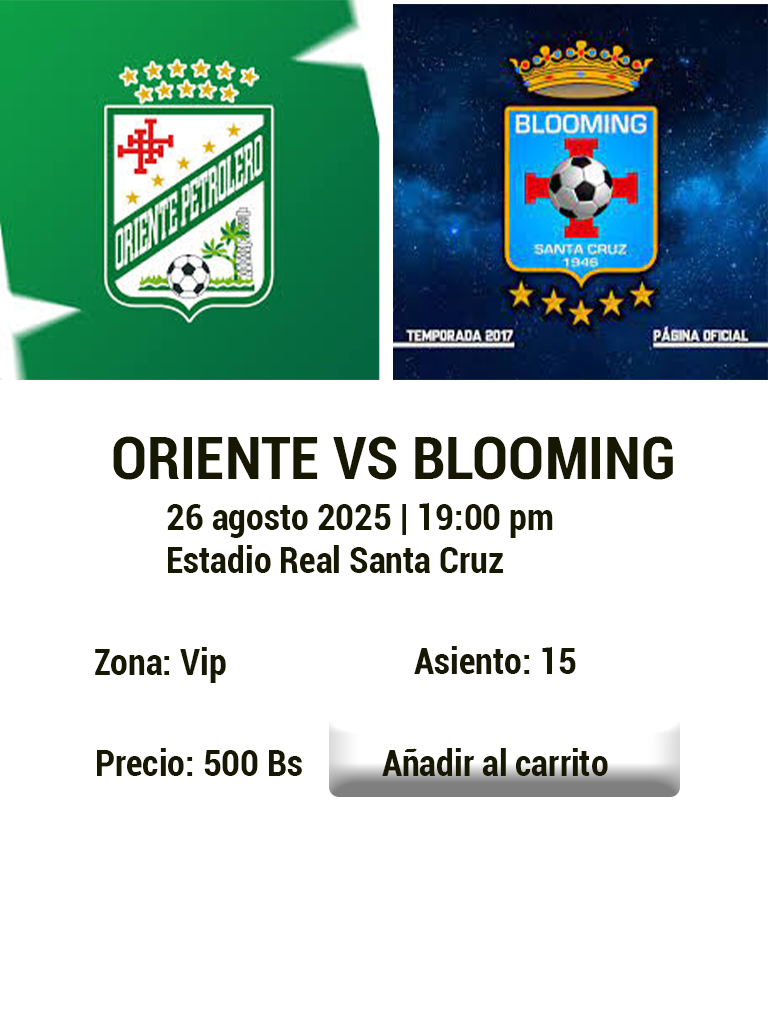
<style>
.page{position:relative;width:768px;height:1024px;background:#ffffff}
.page>*{position:absolute;margin:0}
.t1{font:60px "Roboto-BoldCondensed";color:#171802}
.t2{font:36px "Roboto-BoldCondensed";color:#171802}
</style>
<div class="page">
<p class="t1" style="left:113px;top:436px;width:560px;height:44px">ORIENTE VS BLOOMING</p>
<p class="t2" style="left:167px;top:503px;width:386px;height:70px">26 agosto 2025 | 19:00 pm<br>Estadio Real Santa Cruz</p>
<p class="t2" style="left:95px;top:647px;width:131px;height:36px">Zona: Vip</p>
<p class="t2" style="left:414px;top:646px;width:162px;height:28px">Asiento: 15</p>
<p class="t2" style="left:97px;top:748px;width:205px;height:28px">Precio: 500 Bs</p>
<p class="t2" style="left:382px;top:748px;width:226px;height:28px">Añadir al carrito</p>
</div>
